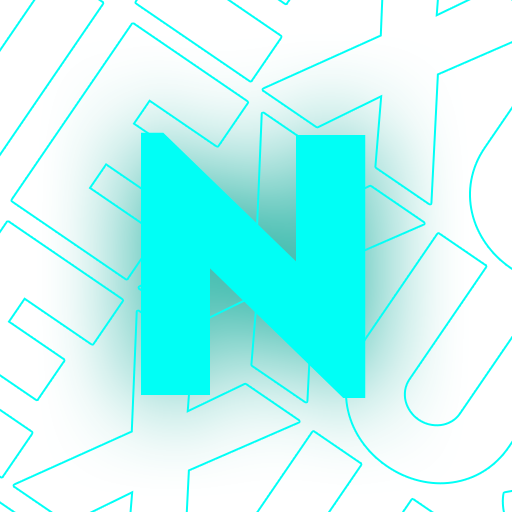
<style>
.page{position:relative;width:512px;height:512px;background:#ffffff}
.page>*{position:absolute;margin:0}
.t1{font:330.6px "LEMONMILK-Bold";color:#00fff6}
</style>
<div class="page">
<p class="t1" style="left:141px;top:132px;width:225px;height:266px">n</p>
</div>
